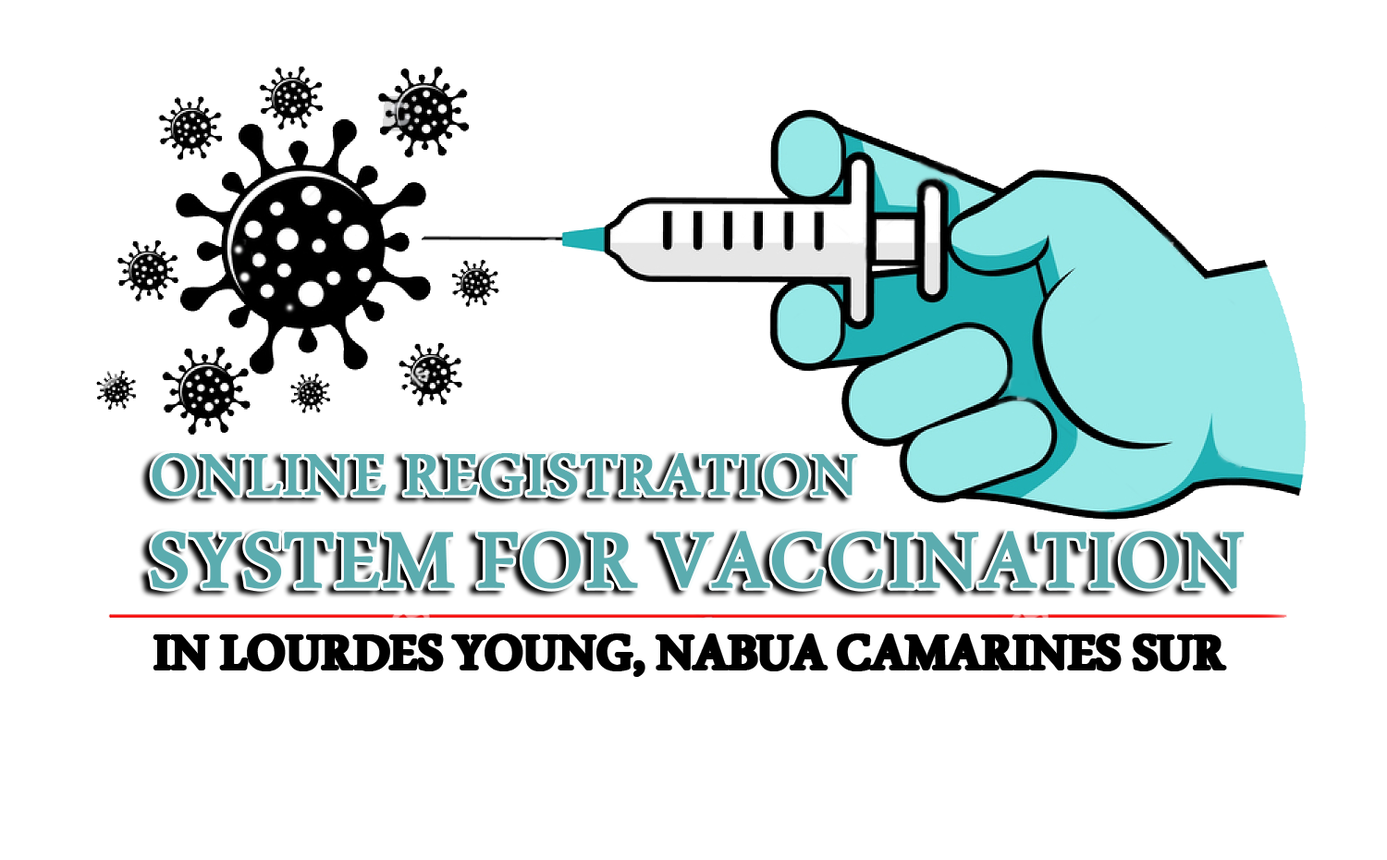
<style>
.page{position:relative;width:1387px;height:860px;background:#ffffff}
.page>*{position:absolute;margin:0}
.t1{font:112.8px/92.4px "MicrosoftUighur";color:#5bacaf;font-weight:bold}
.t2{font:85px/92.4px "MicrosoftUighur";color:#5bacaf;font-weight:bold}
.t3{font:66.6px "MicrosoftUighur";color:#000000;font-weight:bold}
</style>
<div class="page">
<p class="t1" style="left:150px;top:453px;width:1094px;height:136px"><span class="t2">ONLINE REGISTRATION <br></span>SYSTEM FOR VACCINATION</p>
<p class="t3" style="left:154px;top:635px;width:1071px;height:40px">IN LOURDES YOUNG, NABUA CAMARINES SUR</p>
</div>
